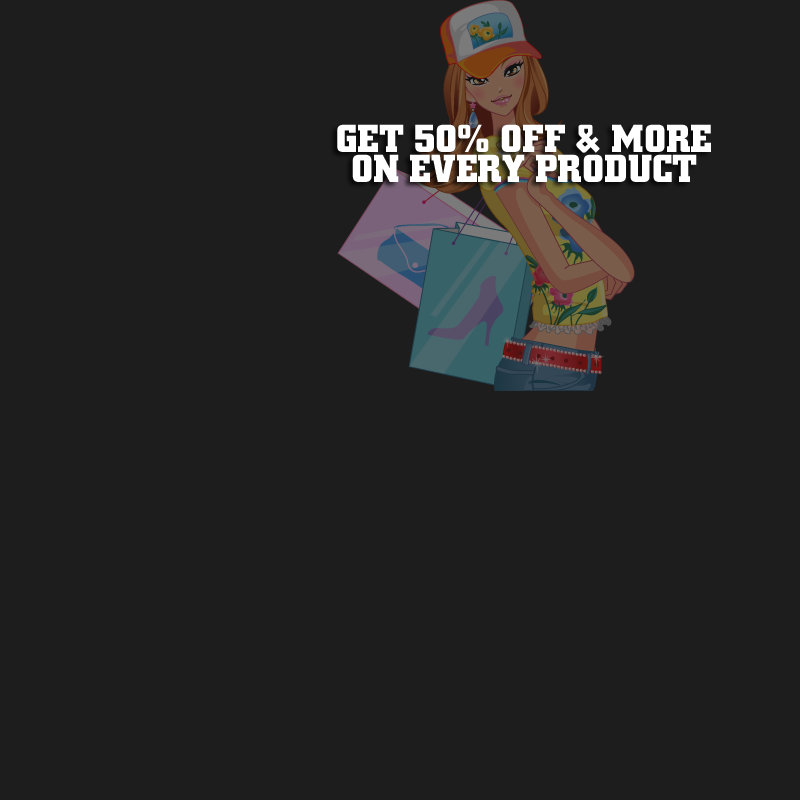
<style>
.page{position:relative;width:800px;height:800px;background:#1d1d1d}
.page>*{position:absolute;margin:0}
.t1{font:40.9px/29.9px "CityD-Bold";color:#ffffff;text-transform:uppercase}
</style>
<div class="page">
<p class="t1" style="left:337px;top:124px;width:374px;height:58px;text-align:center">Get 50% Off &amp; More<br>On Every Product</p>
</div>
